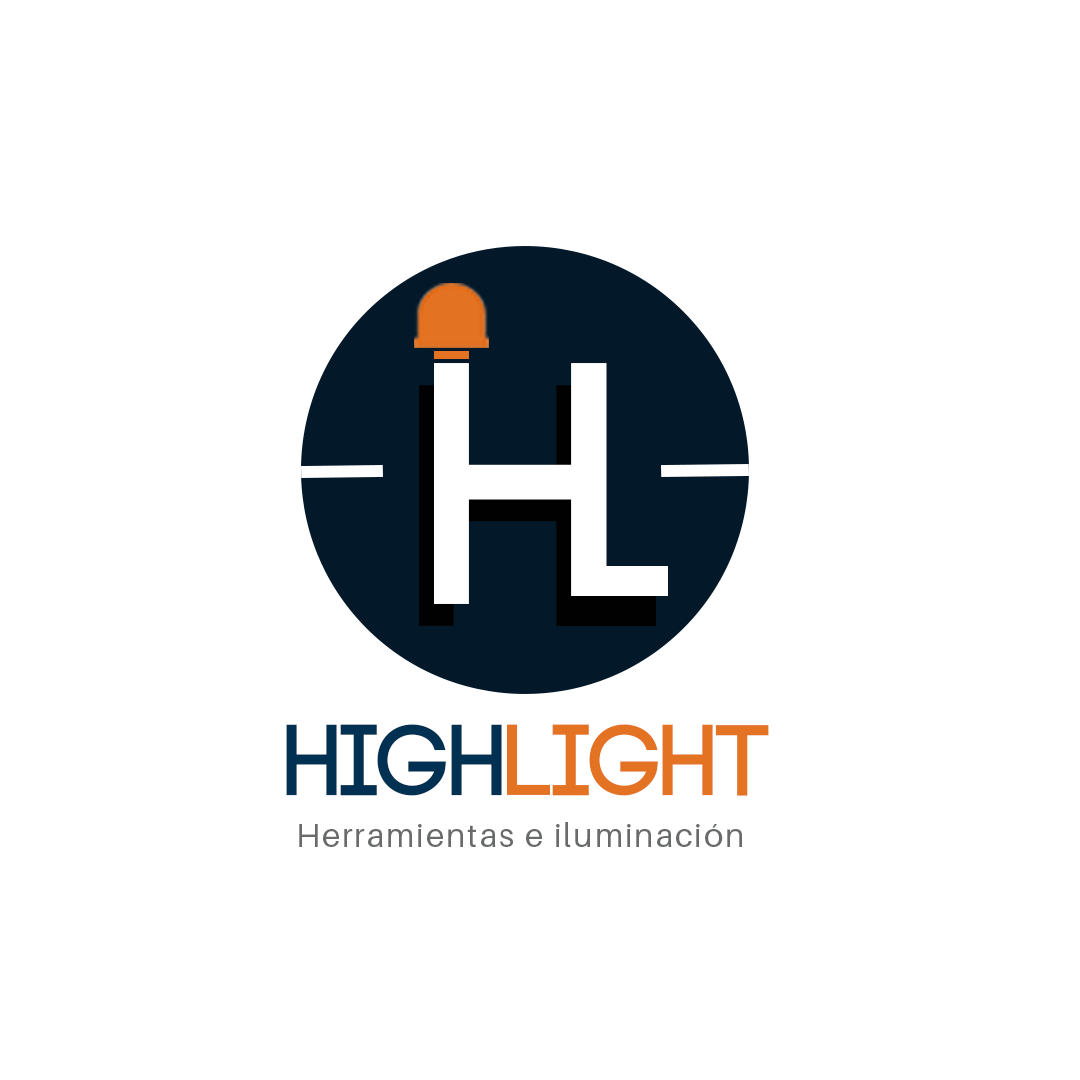
<style>
.page{position:relative;width:1080px;height:1080px;background:#ffffff}
.page>*{position:absolute;margin:0}
.t1{font:344.6px "Code-Bold";color:#ffffff}
.t2{font:100.1px "Code-Bold";color:#e37222}
.t3{font:100.1px "Code-Bold";color:#003153}
.t4{font:33.4px "Aileron-Regular";letter-spacing:0.05em;color:#686a6b}
</style>
<div class="page">
<p class="t1" style="left:434px;top:363px;width:173px;height:241px">h</p>
<p class="t2" style="left:286px;top:724px;width:483px;height:72px"><span class="t3">HIGH</span>LIGHT</p>
<p class="t4" style="left:299px;top:822px;width:443px;height:25px">Herramientas e iluminación</p>
</div>
